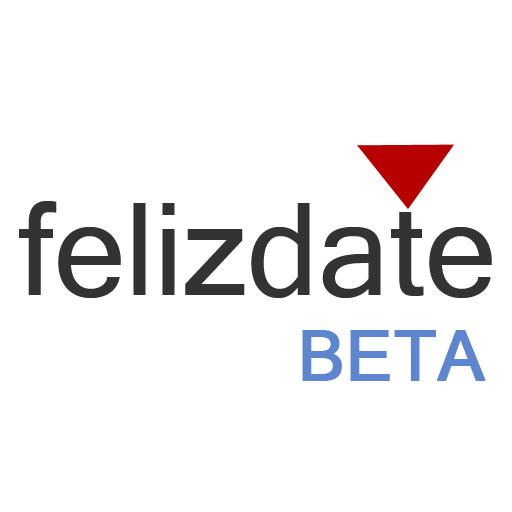
<style>
.page{position:relative;width:512px;height:512px;background:#ffffff}
.page>*{position:absolute;margin:0}
.t1{font:142.1px "Latha";color:#333333}
.t2{font:76.5px "Latha";color:#5d85d0;font-weight:bold}
</style>
<div class="page">
<p class="t1" style="left:19px;top:201px;width:473px;height:97px">felizdate</p>
<p class="t2" style="left:302px;top:330px;width:184px;height:51px">BETA</p>
</div>
